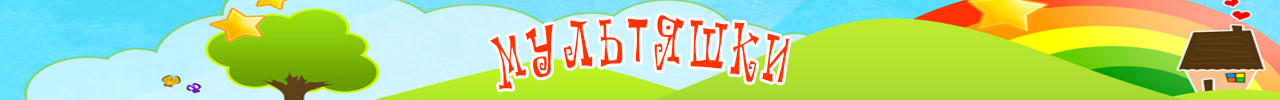
<style>
.page{position:relative;width:1280px;height:100px}
.page>*{position:absolute;margin:0}
.t1{font:66px "KotLeopold";letter-spacing:0.1em;color:#ff3301;scale:0.73 1}
</style>
<div class="page">
<p class="t1" style="left:490px;top:15px;width:299px;height:75px">МУЛЬТЯШКИ</p>
</div>
